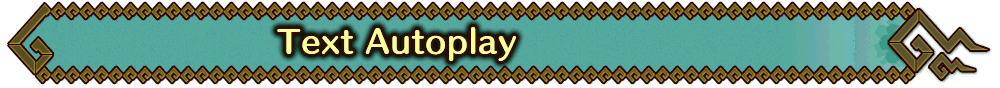
<style>
.page{position:relative;width:1000px;height:88px;background:#55aa9e}
.page>*{position:absolute;margin:0}
.t1{font:30px "HummingStd-B";letter-spacing:0.025em;color:#ffff9c}
</style>
<div class="page">
<p class="t1" style="left:277px;top:27px;width:239px;height:34px">Text Autoplay</p>
</div>
